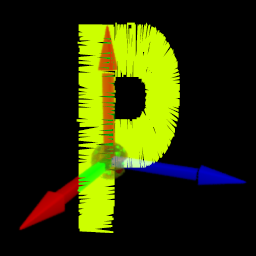
<style>
.page{position:relative;width:256px;height:256px;background:#000000}
.page>*{position:absolute;margin:0}
.t1{font:262.3px "Base05";color:#ccff00;scale:0.55 1}
</style>
<div class="page">
<p class="t1" style="left:76px;top:22px;width:104px;height:211px">P</p>
</div>
